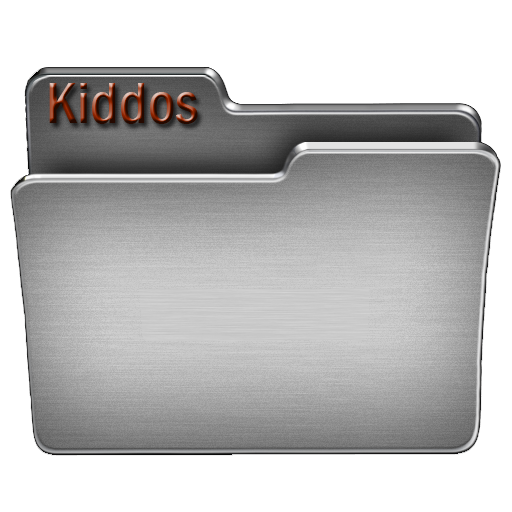
<style>
.page{position:relative;width:512px;height:512px;background:#ffffff}
.page>*{position:absolute;margin:0}
.t1{font:60px "FranklinGothic-MediumCond"}
</style>
<div class="page">
<p class="t1" style="left:49px;top:83px;width:149px;height:41px">Kiddos</p>
</div>
